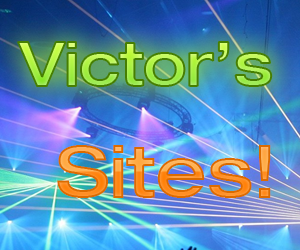
<style>
.page{position:relative;width:300px;height:250px}
.page>*{position:absolute;margin:0}
.t1{font:60px "HelveticaNeueLT-MediumExt";letter-spacing:-0.01em}
.t2{font:72px "HelveticaNeueLT-MediumExt";letter-spacing:-0.01em}
</style>
<div class="page">
<p class="t1" style="left:18px;top:42px;width:254px;height:44px">Victor’s</p>
<p class="t2" style="left:57px;top:145px;width:214px;height:53px">Sites!</p>
</div>
